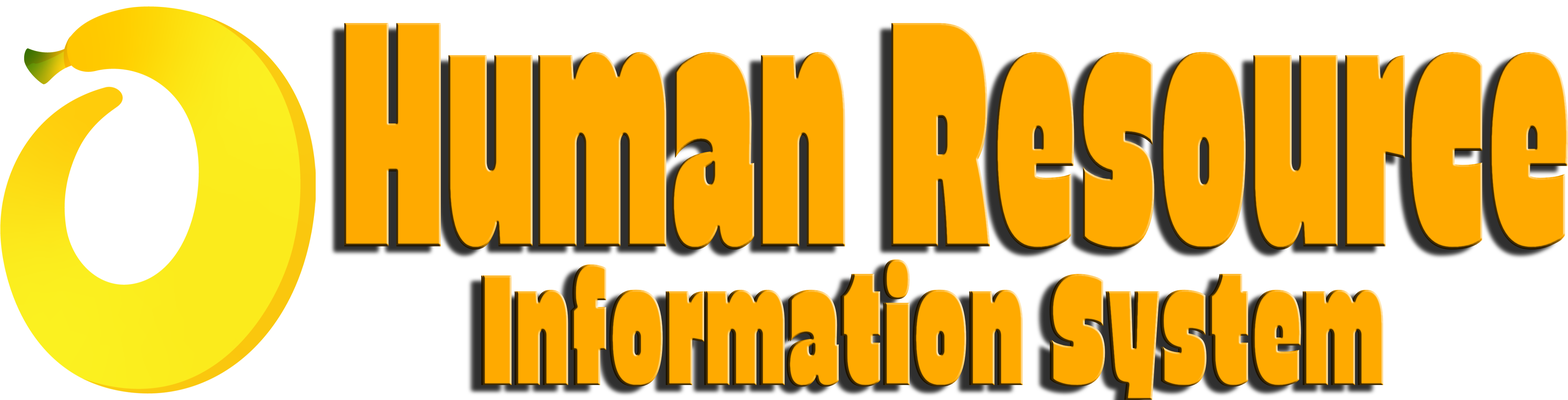
<style>
.page{position:relative;width:1568px;height:400px;background:#ffaa00}
.page>*{position:absolute;margin:0}
.t1{font:321.6px "EricaOne-Regular";color:#ffaa00;scale:0.42 1}
.t2{font:158.4px "EricaOne-Regular";color:#ffaa00;scale:0.52 1}
</style>
<div class="page">
<p class="t1" style="left:344px;top:24px;width:1224px;height:226px">Human Resource</p>
<p class="t1" style="left:344px;top:23px;width:1224px;height:226px">Human Resource</p>
<p class="t2" style="left:481px;top:259px;width:901px;height:141px">Information System</p>
<p class="t2" style="left:483px;top:259px;width:900px;height:141px">Information System</p>
</div>
